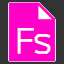
<style>
.page{position:relative;width:64px;height:64px;background:#ff00c7}
.page>*{position:absolute;margin:0}
.t1{font:36.6px "Bender";letter-spacing:-0.01em;color:#ffffff}
</style>
<div class="page">
<p class="t1" style="left:17px;top:28px;width:34px;height:26px">Fs</p>
</div>
